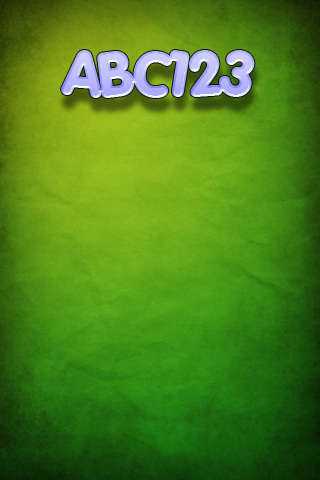
<style>
.page{position:relative;width:320px;height:480px}
.page>*{position:absolute;margin:0}
.t1{font:60px "Porkys";color:#bfbfff}
</style>
<div class="page">
<p class="t1" style="left:61px;top:50px;width:194px;height:48px">ABC123</p>
</div>
